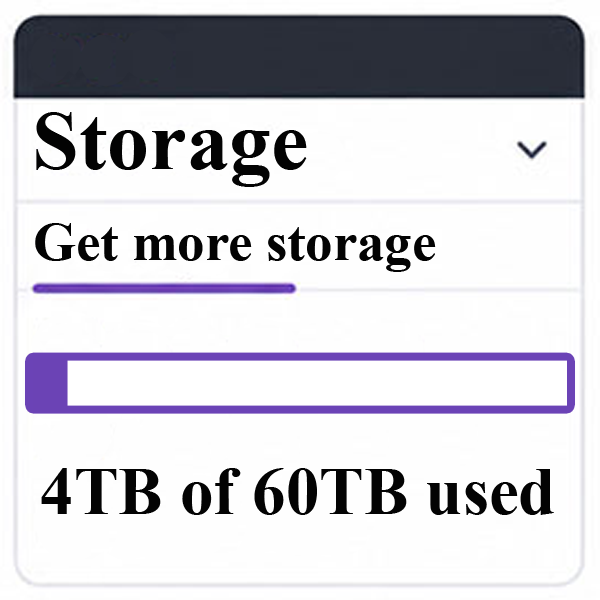
<style>
.page{position:relative;width:600px;height:600px;background:#fefefe}
.page>*{position:absolute;margin:0}
.t1{font:84.3px "TimesNewRomanPS-BoldMT";color:#030303}
.t2{font:54.7px "TimesNewRomanPS-BoldMT";color:#030303}
.t3{font:67px "TimesNewRomanPS-BoldMT";color:#030303}
</style>
<div class="page">
<p class="t1" style="left:36px;top:112px;width:271px;height:75px">Storage</p>
<p class="t2" style="left:35px;top:223px;width:401px;height:49px">Get more storage</p>
<p class="t3" style="left:41px;top:468px;width:513px;height:47px">4TB of 60TB used</p>
</div>
